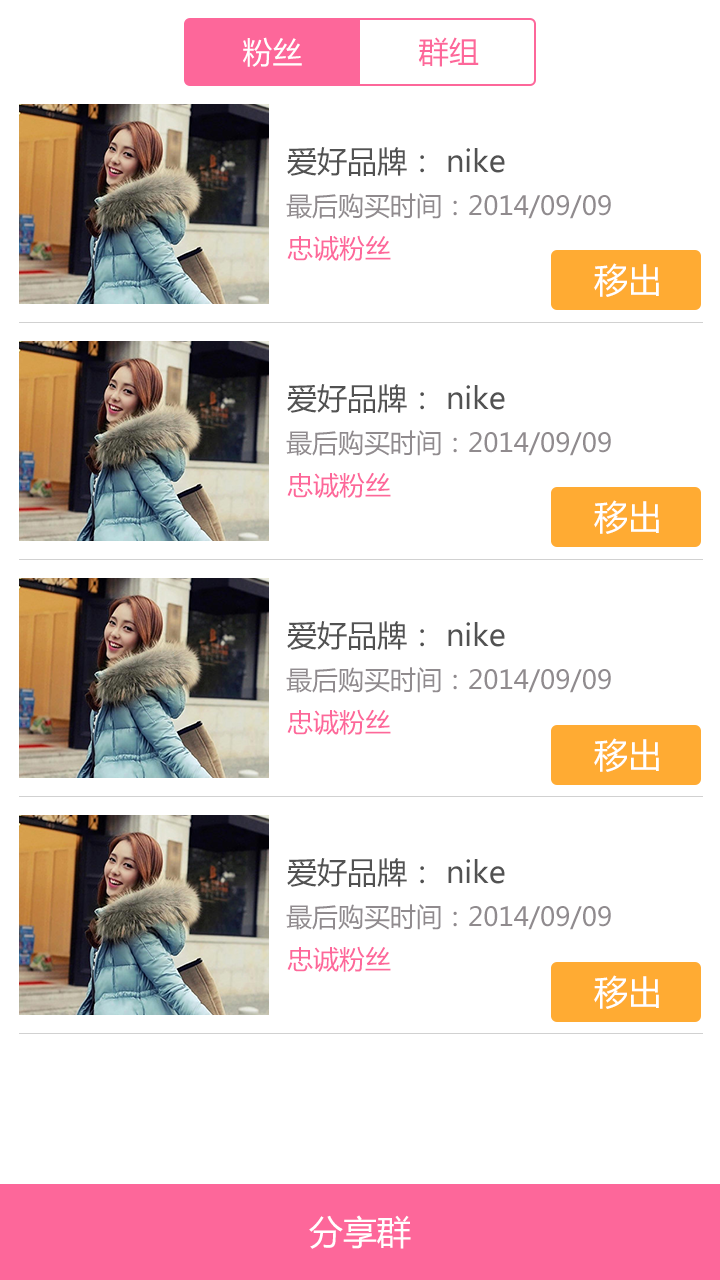
<style>
.page{position:relative;width:720px;height:1280px;background:#ffffff}
.page>*{position:absolute;margin:0}
.t1{font:30px "MicrosoftYaHei";color:#ffffff}
.t2{font:30px "MicrosoftYaHei";color:#fd679a}
.t3{font:30px "MicrosoftYaHei";color:#525252}
.t4{font:26px "MicrosoftYaHei";color:#908b8e}
.t5{font:26px "MicrosoftYaHei";color:#fd679a}
.t6{font:34px "MicrosoftYaHei";color:#ffffff}
</style>
<div class="page">
<p class="t1" style="left:243px;top:37px;width:59px;height:30px">粉丝</p>
<p class="t2" style="left:418px;top:37px;width:61px;height:30px">群组</p>
<p class="t3" style="left:287px;top:147px;width:218px;height:29px">爱好品牌： nike</p>
<p class="t4" style="left:286px;top:193px;width:325px;height:26px">最后购买时间：2014/09/09</p>
<p class="t5" style="left:287px;top:235px;width:104px;height:26px">忠诚粉丝</p>
<p class="t6" style="left:594px;top:263px;width:65px;height:34px">移出</p>
<p class="t3" style="left:287px;top:384px;width:218px;height:29px">爱好品牌： nike</p>
<p class="t4" style="left:286px;top:430px;width:325px;height:26px">最后购买时间：2014/09/09</p>
<p class="t5" style="left:287px;top:472px;width:104px;height:26px">忠诚粉丝</p>
<p class="t6" style="left:594px;top:500px;width:65px;height:34px">移出</p>
<p class="t3" style="left:287px;top:621px;width:218px;height:29px">爱好品牌： nike</p>
<p class="t4" style="left:286px;top:667px;width:325px;height:26px">最后购买时间：2014/09/09</p>
<p class="t5" style="left:287px;top:709px;width:104px;height:26px">忠诚粉丝</p>
<p class="t6" style="left:594px;top:738px;width:65px;height:34px">移出</p>
<p class="t3" style="left:287px;top:858px;width:218px;height:29px">爱好品牌： nike</p>
<p class="t4" style="left:286px;top:904px;width:325px;height:26px">最后购买时间：2014/09/09</p>
<p class="t5" style="left:287px;top:946px;width:104px;height:26px">忠诚粉丝</p>
<p class="t6" style="left:594px;top:975px;width:65px;height:34px">移出</p>
<p class="t6" style="left:309px;top:1215px;width:102px;height:34px">分享群</p>
</div>
